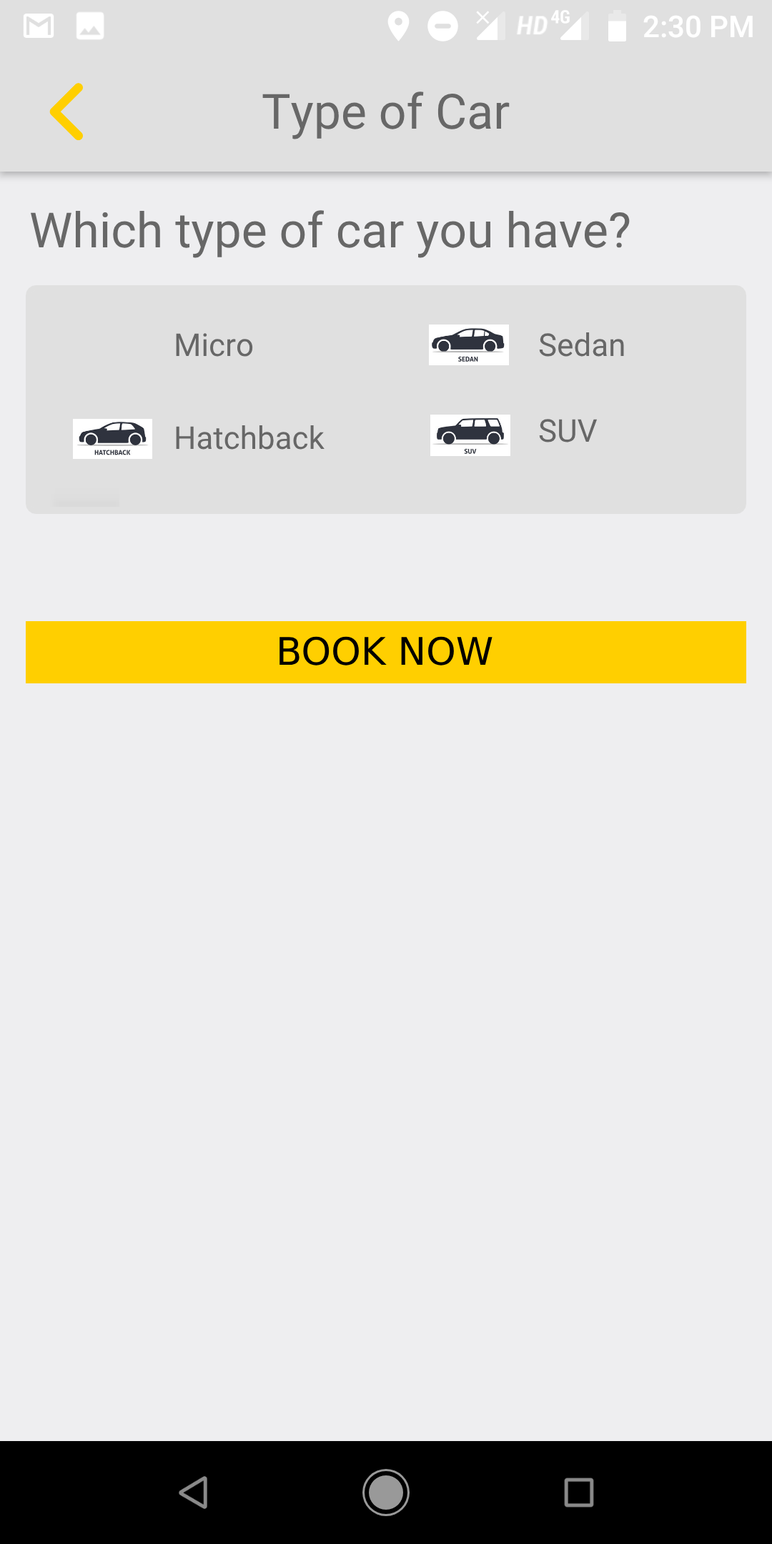
<style>
.page{position:relative;width:772px;height:1544px;background:#eeeef0}
.page>*{position:absolute;margin:0}
.t1{font:48.6px "Roboto-Regular";color:#676767}
.t2{font:31.5px "Roboto-Regular";color:#676767}
.t3{font:37.9px "DejaVuSans";color:#000000}
</style>
<div class="page">
<p class="t1" style="left:262px;top:92px;width:248px;height:47px">Type of Car</p>
<p class="t1" style="left:31px;top:210px;width:599px;height:48px">Which type of car you have?</p>
<p class="t2" style="left:176px;top:333px;width:77px;height:24px">Micro</p>
<p class="t2" style="left:539px;top:332px;width:85px;height:25px">Sedan</p>
<p class="t2" style="left:176px;top:425px;width:149px;height:25px">Hatchback</p>
<p class="t2" style="left:539px;top:419px;width:59px;height:24px">SUV</p>
<p class="t3" style="left:280px;top:636px;width:213px;height:30px">BOOK NOW</p>
</div>
